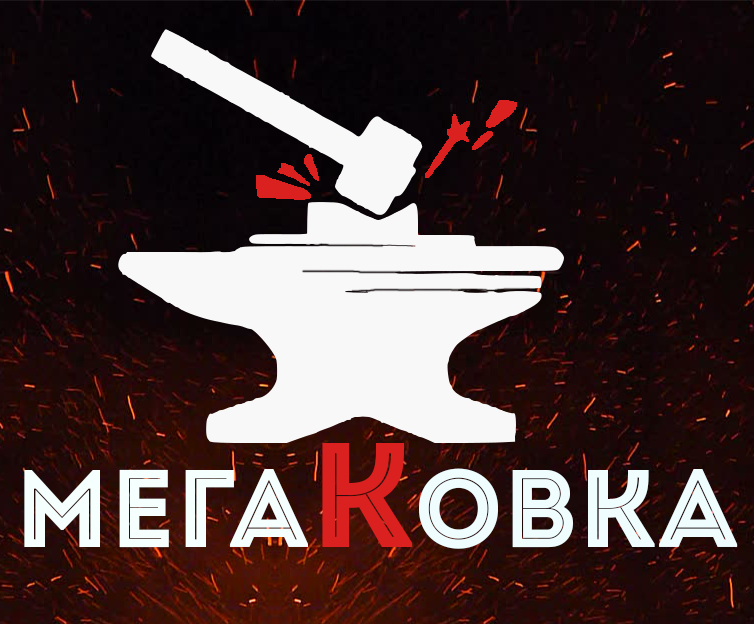
<style>
.page{position:relative;width:754px;height:624px}
.page>*{position:absolute;margin:0}
.t1{font:110px "Intro-Inline";color:#f5fffe}
.t2{font:148px "Intro-Inline";color:#db2020}
.t3{font:110px "Intro-Inline";color:#f0fdff}
</style>
<div class="page">
<p class="t1" style="left:24px;top:443px;width:713px;height:106px">МЕГА<span class="t2">К</span><span class="t3">ОВКА</span></p>
</div>
